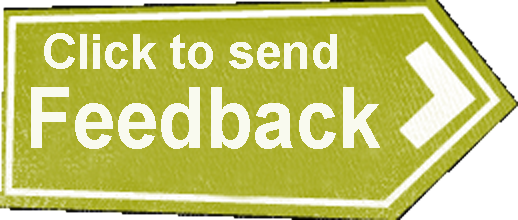
<style>
.page{position:relative;width:518px;height:220px}
.page>*{position:absolute;margin:0}
.t1{font:47.8px "Arial-BoldMT";color:#f9faef}
.t2{font:84.5px "Arial-BoldMT";color:#f9faef;scale:0.91 1}
</style>
<div class="page">
<p class="t1" style="left:44px;top:33px;width:293px;height:36px">Click to send</p>
<p class="t2" style="left:31px;top:87px;width:349px;height:62px">Feedback</p>
</div>
